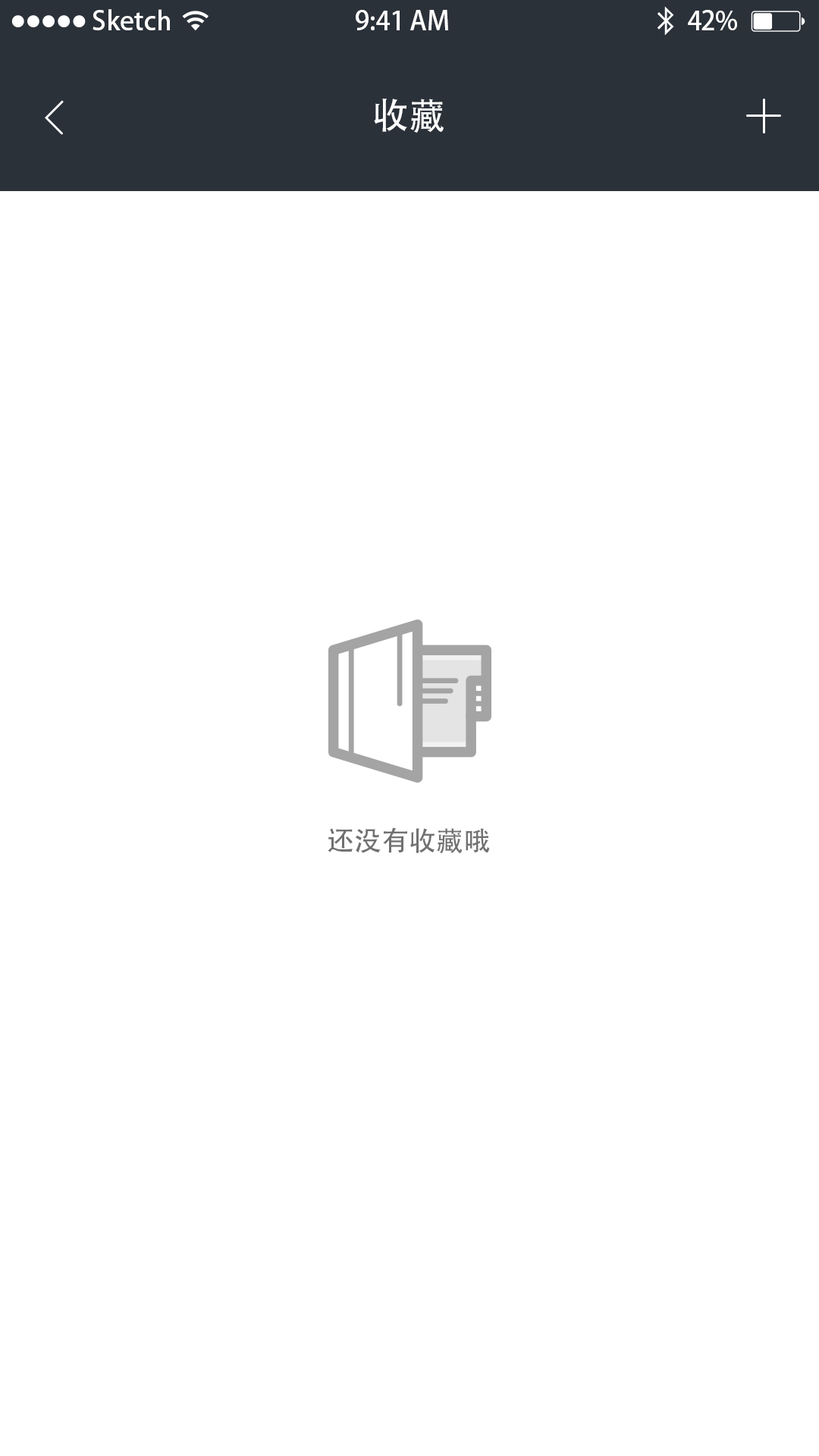
<style>
.page{position:relative;width:819px;height:1456px;background:#ffffff}
.page>*{position:absolute;margin:0}
.t1{font:26.2px "AdobeHeitiStd-Regular";color:#ffffff}
.t2{font:36.4px "AdobeHeitiStd-Regular";color:#ffffff}
.t3{font:27.3px "AdobeHeitiStd-Regular";color:#717171}
</style>
<div class="page">
<p class="t1" style="left:93px;top:9px;width:77px;height:21px">Sketch</p>
<p class="t1" style="left:356px;top:10px;width:92px;height:20px">9:41 AM</p>
<p class="t1" style="left:688px;top:10px;width:49px;height:21px">42%</p>
<p class="t2" style="left:374px;top:99px;width:70px;height:34px">收藏</p>
<p class="t3" style="left:328px;top:827px;width:162px;height:27px">还没有收藏哦</p>
</div>
